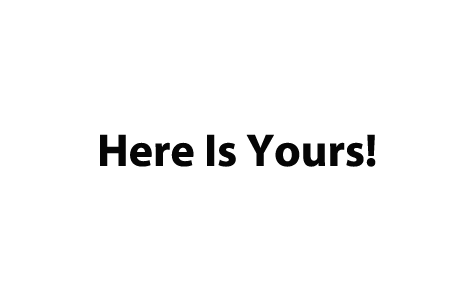
<style>
.page{position:relative;width:450px;height:300px;background:#ffffff}
.page>*{position:absolute;margin:0}
.t1{font:46px "MyriadPro-Bold";color:#050505}
</style>
<div class="page">
<p class="t1" style="left:100px;top:134px;width:276px;height:33px">Here Is Yours!</p>
</div>
